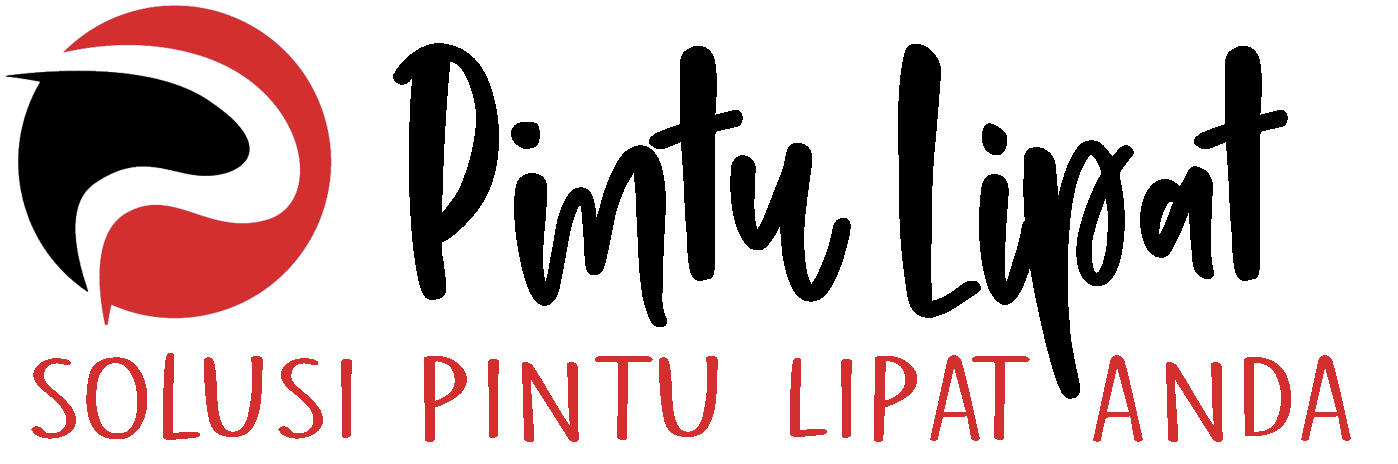
<style>
.page{position:relative;width:1398px;height:464px;background:#ffffff}
.page>*{position:absolute;margin:0}
.t1{font:376px "StrawberryShortcake-Regular";color:#000000;scale:0.69 1}
.t2{font:105.9px "StrawberryShortcakeMono-Regular";color:#d32f2f;scale:1.59 1}
</style>
<div class="page">
<p class="t1" style="left:393px;top:43px;width:895px;height:356px">Pintu Lipat</p>
<p class="t2" style="left:31px;top:353px;width:1320px;height:89px">Solusi Pintu Lipat Anda</p>
</div>
